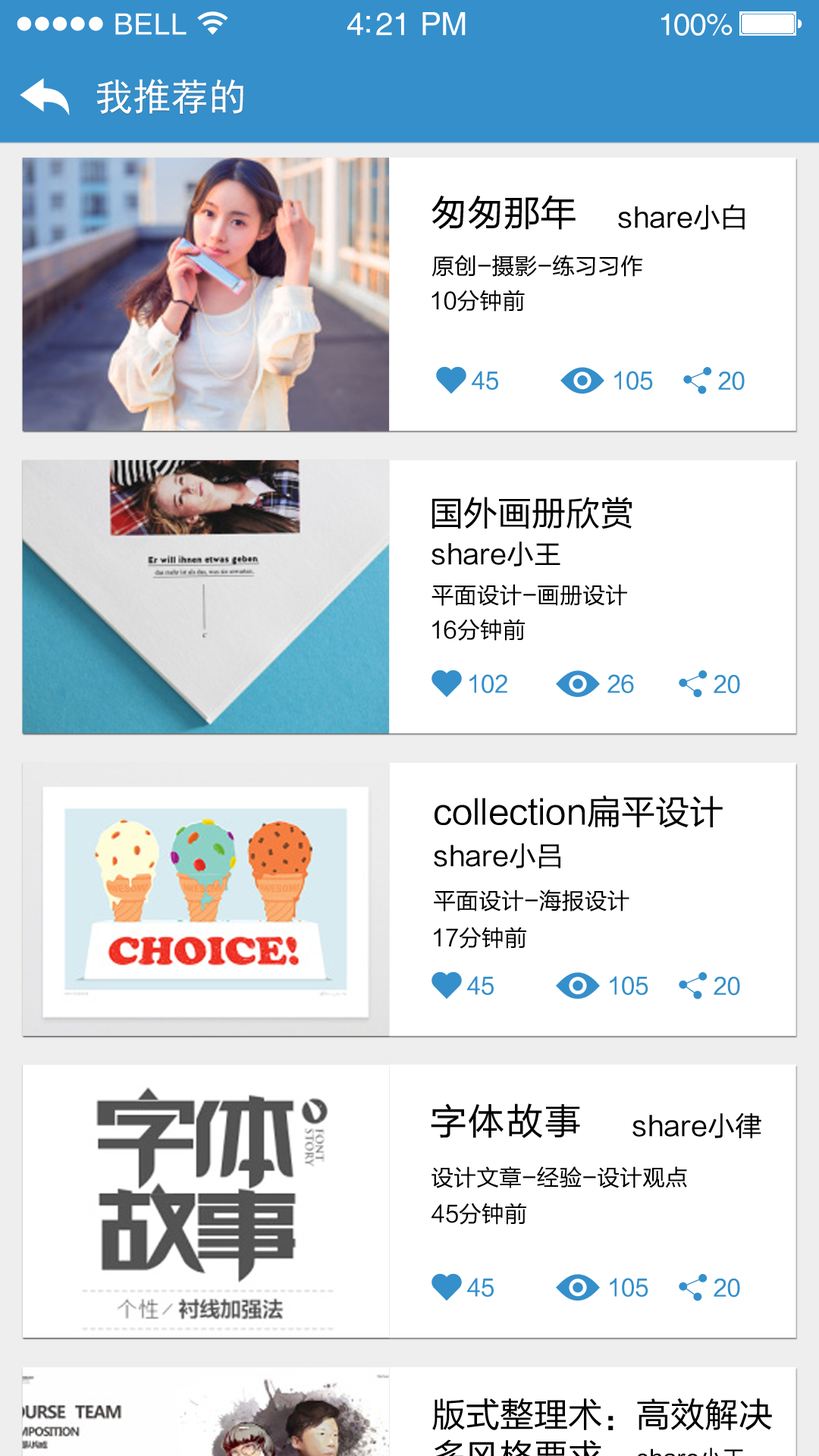
<style>
.page{position:relative;width:819px;height:1456px;background:#ffffff}
.page>*{position:absolute;margin:0}
.t1{font:29.3px "Helvetica";letter-spacing:0.02em;color:#ffffff}
.t2{font:31.8px "Helvetica";letter-spacing:-0.02em;color:#ffffff}
.t3{font:30.6px "Helvetica";letter-spacing:-0.02em;color:#ffffff}
.t4{font:37.9px "SimHei";color:#ffffff}
.t5{font:36.4px "FZLTHJW--GB1-0";color:#000000}
.t6{font:27.3px "FZLTHJW--GB1-0";color:#000000}
.t7{font:22.7px "FZLTHJW--GB1-0";color:#000000}
.t8{font:22.7px "FZLTHJW--GB1-0";color:#358fcb}
.t9{font:34.1px "FZLTHJW--GB1-0";color:#010000}
.t10{font:34.1px "FZLTHJW--GB1-0";color:#000000}
.t11{font:36.4px "FZLTHJW--GB1-0";letter-spacing:0.05em;color:#000000}
</style>
<div class="page">
<p class="t1" style="left:115px;top:13px;width:72px;height:22px">BELL</p>
<p class="t2" style="left:347px;top:12px;width:119px;height:24px">4:21 PM</p>
<p class="t3" style="left:661px;top:14px;width:72px;height:22px">100%</p>
<p class="t4" style="left:96px;top:79px;width:147px;height:35px">我推荐的</p>
<p class="t5" style="left:431px;top:195px;width:145px;height:35px">匆匆那年</p>
<p class="t6" style="left:618px;top:204px;width:127px;height:26px">share小白</p>
<p class="t7" style="left:431px;top:255px;width:211px;height:22px">原创-摄影-练习习作</p>
<p class="t7" style="left:431px;top:290px;width:94px;height:22px">10分钟前</p>
<p class="t8" style="left:472px;top:371px;width:26px;height:19px">45</p>
<p class="t8" style="left:614px;top:371px;width:39px;height:19px">105</p>
<p class="t8" style="left:718px;top:372px;width:27px;height:19px">20</p>
<p class="t9" style="left:432px;top:497px;width:200px;height:32px">国外画册欣赏</p>
<p class="t6" style="left:431px;top:541px;width:129px;height:25px">share小王</p>
<p class="t7" style="left:431px;top:584px;width:196px;height:22px">平面设计-画册设计</p>
<p class="t7" style="left:432px;top:619px;width:93px;height:22px">16分钟前</p>
<p class="t8" style="left:469px;top:674px;width:38px;height:19px">102</p>
<p class="t8" style="left:607px;top:674px;width:27px;height:19px">26</p>
<p class="t8" style="left:714px;top:675px;width:26px;height:19px">20</p>
<p class="t10" style="left:435px;top:795px;width:288px;height:33px">collection扁平设计</p>
<p class="t6" style="left:434px;top:843px;width:126px;height:25px">share小吕</p>
<p class="t7" style="left:434px;top:890px;width:195px;height:22px">平面设计-海报设计</p>
<p class="t7" style="left:434px;top:927px;width:92px;height:22px">17分钟前</p>
<p class="t8" style="left:467px;top:976px;width:27px;height:19px">45</p>
<p class="t8" style="left:610px;top:976px;width:38px;height:19px">105</p>
<p class="t8" style="left:714px;top:977px;width:26px;height:19px">20</p>
<p class="t11" style="left:431px;top:1103px;width:149px;height:35px">字体故事</p>
<p class="t6" style="left:632px;top:1112px;width:129px;height:26px">share小律</p>
<p class="t7" style="left:431px;top:1166px;width:256px;height:22px">设计文章-经验-设计观点</p>
<p class="t7" style="left:431px;top:1203px;width:95px;height:22px">45分钟前</p>
<p class="t8" style="left:467px;top:1278px;width:27px;height:19px">45</p>
<p class="t8" style="left:610px;top:1278px;width:38px;height:19px">105</p>
<p class="t8" style="left:714px;top:1279px;width:26px;height:18px">20</p>
</div>
